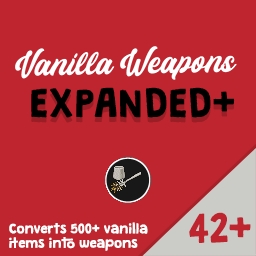
<style>
.page{position:relative;width:256px;height:256px;background:#be252e}
.page>*{position:absolute;margin:0}
.t1{font:30px "Helmida-Regular";color:#ffffff}
.t2{font:18px "Helmida-Regular";color:#000000}
.t3{font:36px "GranstanderClean";color:#000000}
.t4{font:12px "GranstanderClean";color:#ffffff}
.t5{font:36px "GranstanderClean";color:#be252e}
</style>
<div class="page">
<p class="t1" style="left:15px;top:46px;width:222px;height:34px;rotate:-1deg"><span class="t2"><br><br></span>Vanilla Weapons</p>
<p class="t3" style="left:31px;top:87px;width:204px;height:31px">EXPANDED+</p>
<p class="t4" style="left:9px;top:222px;width:139px;height:29px">Converts 500+ vanilla <br>items into weapons</p>
<p class="t5" style="left:189px;top:212px;width:62px;height:31px">42+</p>
</div>
